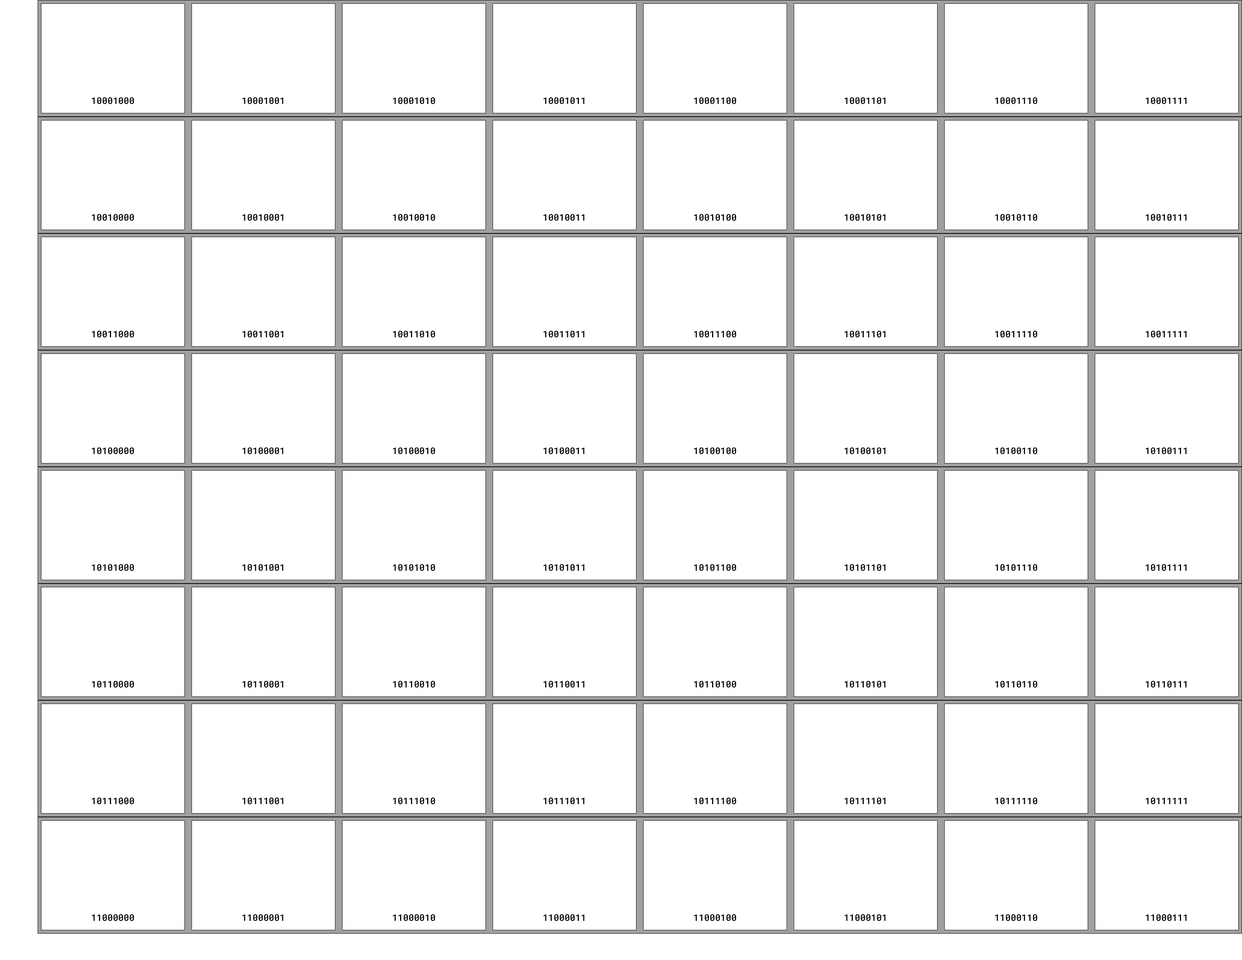
<style>
.page{position:relative;width:1242px;height:960px;background:#ffffff}
.page>*{position:absolute;margin:0}
.t1{font:9px "RobotoMono-Medium";color:#000000}
</style>
<div class="page">
<p class="t1" style="left:92px;top:97px;width:42px;height:7px">10001000</p>
<p class="t1" style="left:242px;top:97px;width:41px;height:7px">10001001</p>
<p class="t1" style="left:393px;top:97px;width:42px;height:7px">10001010</p>
<p class="t1" style="left:544px;top:97px;width:41px;height:7px">10001011</p>
<p class="t1" style="left:694px;top:97px;width:42px;height:7px">10001100</p>
<p class="t1" style="left:845px;top:97px;width:41px;height:7px">10001101</p>
<p class="t1" style="left:995px;top:97px;width:42px;height:7px">10001110</p>
<p class="t1" style="left:1146px;top:97px;width:41px;height:7px">10001111</p>
<p class="t1" style="left:92px;top:214px;width:42px;height:7px">10010000</p>
<p class="t1" style="left:242px;top:214px;width:41px;height:7px">10010001</p>
<p class="t1" style="left:393px;top:214px;width:42px;height:7px">10010010</p>
<p class="t1" style="left:544px;top:214px;width:41px;height:7px">10010011</p>
<p class="t1" style="left:694px;top:214px;width:42px;height:7px">10010100</p>
<p class="t1" style="left:845px;top:214px;width:41px;height:7px">10010101</p>
<p class="t1" style="left:995px;top:214px;width:42px;height:7px">10010110</p>
<p class="t1" style="left:1146px;top:214px;width:41px;height:7px">10010111</p>
<p class="t1" style="left:92px;top:331px;width:42px;height:7px">10011000</p>
<p class="t1" style="left:242px;top:331px;width:41px;height:7px">10011001</p>
<p class="t1" style="left:393px;top:331px;width:42px;height:7px">10011010</p>
<p class="t1" style="left:544px;top:331px;width:41px;height:7px">10011011</p>
<p class="t1" style="left:694px;top:331px;width:42px;height:7px">10011100</p>
<p class="t1" style="left:845px;top:331px;width:41px;height:7px">10011101</p>
<p class="t1" style="left:995px;top:331px;width:42px;height:7px">10011110</p>
<p class="t1" style="left:1146px;top:331px;width:41px;height:7px">10011111</p>
<p class="t1" style="left:92px;top:447px;width:42px;height:7px">10100000</p>
<p class="t1" style="left:242px;top:447px;width:41px;height:7px">10100001</p>
<p class="t1" style="left:393px;top:447px;width:42px;height:7px">10100010</p>
<p class="t1" style="left:544px;top:447px;width:41px;height:7px">10100011</p>
<p class="t1" style="left:694px;top:447px;width:42px;height:7px">10100100</p>
<p class="t1" style="left:845px;top:447px;width:41px;height:7px">10100101</p>
<p class="t1" style="left:995px;top:447px;width:42px;height:7px">10100110</p>
<p class="t1" style="left:1146px;top:447px;width:41px;height:7px">10100111</p>
<p class="t1" style="left:92px;top:564px;width:42px;height:7px">10101000</p>
<p class="t1" style="left:242px;top:564px;width:41px;height:7px">10101001</p>
<p class="t1" style="left:393px;top:564px;width:42px;height:7px">10101010</p>
<p class="t1" style="left:544px;top:564px;width:41px;height:7px">10101011</p>
<p class="t1" style="left:694px;top:564px;width:42px;height:7px">10101100</p>
<p class="t1" style="left:845px;top:564px;width:41px;height:7px">10101101</p>
<p class="t1" style="left:995px;top:564px;width:42px;height:7px">10101110</p>
<p class="t1" style="left:1146px;top:564px;width:41px;height:7px">10101111</p>
<p class="t1" style="left:92px;top:681px;width:42px;height:7px">10110000</p>
<p class="t1" style="left:242px;top:681px;width:41px;height:7px">10110001</p>
<p class="t1" style="left:393px;top:681px;width:42px;height:7px">10110010</p>
<p class="t1" style="left:544px;top:681px;width:41px;height:7px">10110011</p>
<p class="t1" style="left:694px;top:681px;width:42px;height:7px">10110100</p>
<p class="t1" style="left:845px;top:681px;width:41px;height:7px">10110101</p>
<p class="t1" style="left:995px;top:681px;width:42px;height:7px">10110110</p>
<p class="t1" style="left:1146px;top:681px;width:41px;height:7px">10110111</p>
<p class="t1" style="left:92px;top:797px;width:42px;height:7px">10111000</p>
<p class="t1" style="left:242px;top:797px;width:41px;height:7px">10111001</p>
<p class="t1" style="left:393px;top:797px;width:42px;height:7px">10111010</p>
<p class="t1" style="left:544px;top:797px;width:41px;height:7px">10111011</p>
<p class="t1" style="left:694px;top:797px;width:42px;height:7px">10111100</p>
<p class="t1" style="left:845px;top:797px;width:41px;height:7px">10111101</p>
<p class="t1" style="left:995px;top:797px;width:42px;height:7px">10111110</p>
<p class="t1" style="left:1146px;top:797px;width:41px;height:7px">10111111</p>
<p class="t1" style="left:92px;top:914px;width:42px;height:7px">11000000</p>
<p class="t1" style="left:242px;top:914px;width:41px;height:7px">11000001</p>
<p class="t1" style="left:393px;top:914px;width:42px;height:7px">11000010</p>
<p class="t1" style="left:544px;top:914px;width:41px;height:7px">11000011</p>
<p class="t1" style="left:694px;top:914px;width:42px;height:7px">11000100</p>
<p class="t1" style="left:845px;top:914px;width:41px;height:7px">11000101</p>
<p class="t1" style="left:995px;top:914px;width:42px;height:7px">11000110</p>
<p class="t1" style="left:1146px;top:914px;width:41px;height:7px">11000111</p>
</div>
